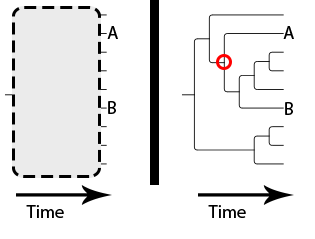
<style>
.page{position:relative;width:315px;height:239px;background:#ffffff}
.page>*{position:absolute;margin:0}
.t1{font:18px "MyriadPro-Regular";color:#000000}
</style>
<div class="page">
<p class="t1" style="left:107px;top:26px;width:11px;height:13px">A</p>
<p class="t1" style="left:283px;top:26px;width:11px;height:13px">A</p>
<p class="t1" style="left:108px;top:101px;width:8px;height:13px">B</p>
<p class="t1" style="left:285px;top:102px;width:8px;height:13px">B</p>
<p class="t1" style="left:26px;top:205px;width:38px;height:13px">Time</p>
<p class="t1" style="left:208px;top:205px;width:38px;height:13px">Time</p>
</div>
